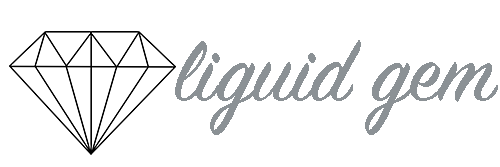
<style>
.page{position:relative;width:500px;height:167px;background:#ffffff}
.page>*{position:absolute;margin:0}
.t1{font:95.8px "SignPainter-HouseScript";color:#8b9195}
</style>
<div class="page">
<p class="t1" style="left:175px;top:40px;width:323px;height:95px">liguid gem</p>
</div>
